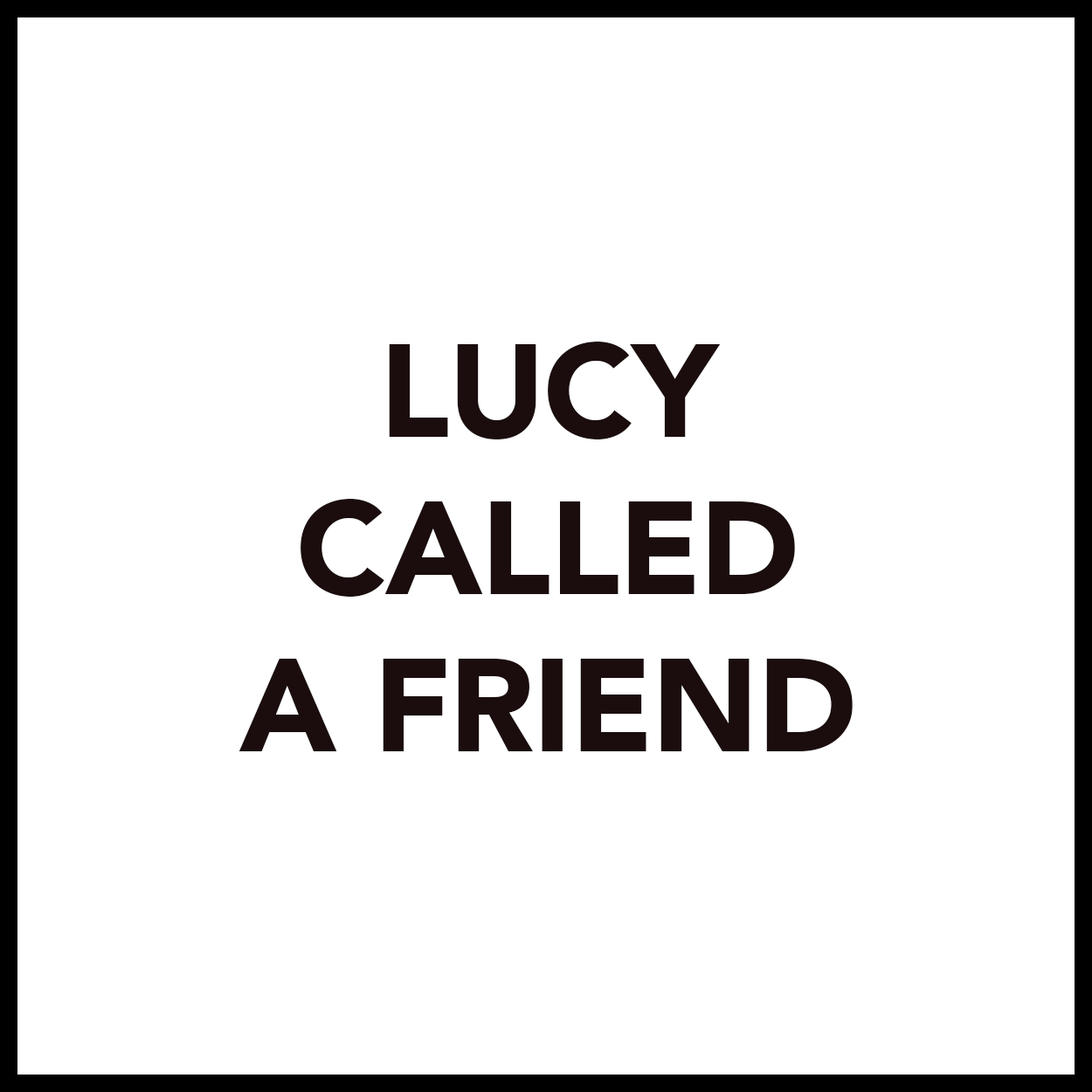
<style>
.page{position:relative;width:1092px;height:1092px;background:#ffffff}
.page>*{position:absolute;margin:0}
.t1{font:131px "Avenir-Black";letter-spacing:-0.01em;color:#1b0d0d}
</style>
<div class="page">
<p class="t1" style="left:238px;top:342px;width:615px;height:409px;text-align:center">LUCY<br>CALLED<br>A FRIEND</p>
</div>
